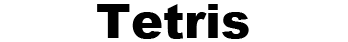
<style>
.page{position:relative;width:348px;height:42px;background:#ffffff}
.page>*{position:absolute;margin:0}
.t1{font:48px "Arial-Black";color:#000000}
</style>
<div class="page">
<p class="t1" style="left:97px;top:4px;width:152px;height:35px">Tetris</p>
</div>
